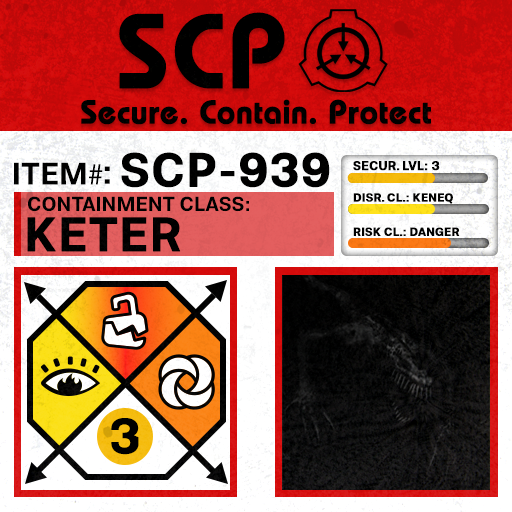
<style>
.page{position:relative;width:512px;height:512px}
.page>*{position:absolute;margin:0}
.t1{font:105.8px "BauhausLT-Demi";color:#000000;font-weight:bold}
.t2{font:33px "BauhausLT-Demi";color:#000000;font-weight:bold}
.t3{font:47.6px "Molde-Semibold";color:#000000;font-weight:bold}
.t4{font:12.5px "Molde-Semibold";color:#000000;font-weight:bold}
.t5{font:31.1px "Molde-Semibold";color:#000000}
.t6{font:31.1px "MyriadPro-Regular";color:#000000}
.t7{font:34.5px "Molde-Semibold";color:#000000}
.t8{font:20.3px "Molde-Semibold";color:#000000}
.t9{font:11.7px "Molde-Semibold";color:#000000;font-weight:bold}
.t10{font:47.8px "Molde-Semibold";color:#000000;font-weight:bold}
</style>
<div class="page">
<p class="t1" style="left:119px;top:12px;width:166px;height:77px">SCP</p>
<p class="t2" style="left:81px;top:99px;width:350px;height:26px">Secure. Contain. Protect</p>
<p class="t3" style="left:121px;top:152px;width:209px;height:36px">SCP-939</p>
<p class="t4" style="left:353px;top:161px;width:87px;height:10px">SECUR. LVL: 3</p>
<p class="t5" style="left:14px;top:162px;width:89px;height:23px">ITEM<span class="t6">#</span></p>
<p class="t7" style="left:104px;top:166px;width:6px;height:18px">:</p>
<p class="t8" style="left:28px;top:196px;width:221px;height:16px">CONTAINMENT CLASS:</p>
<p class="t9" style="left:353px;top:193px;width:100px;height:11px">DISR. CL.: KENEQ</p>
<p class="t10" style="left:27px;top:217px;width:154px;height:35px">KETER</p>
<p class="t9" style="left:353px;top:227px;width:107px;height:9px">RISK CL.: DANGER</p>
</div>
